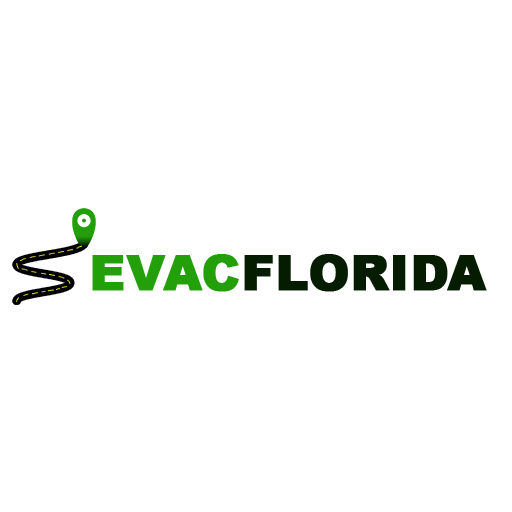
<style>
.page{position:relative;width:512px;height:512px;background:#ffffff}
.page>*{position:absolute;margin:0}
.t1{font:49px "Arial-Black";color:#061c01;text-transform:uppercase;font-weight:bold}
.t2{font:49px "Arial-Black";color:#239f0a;text-transform:uppercase;font-weight:bold}
</style>
<div class="page">
<p class="t1" style="left:92px;top:254px;width:395px;height:38px"><span class="t2">Evac</span>Florida</p>
</div>
